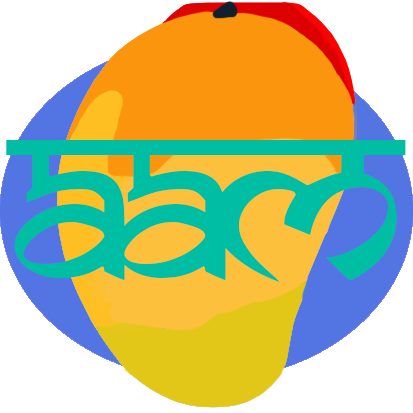
<style>
.page{position:relative;width:413px;height:413px;background:#ffffff}
.page>*{position:absolute;margin:0}
.t1{font:259.8px "SamarkanNormal";letter-spacing:-0.08em;color:#00bea4}
</style>
<div class="page">
<p class="t1" style="left:6px;top:140px;width:400px;height:142px">aam</p>
</div>
